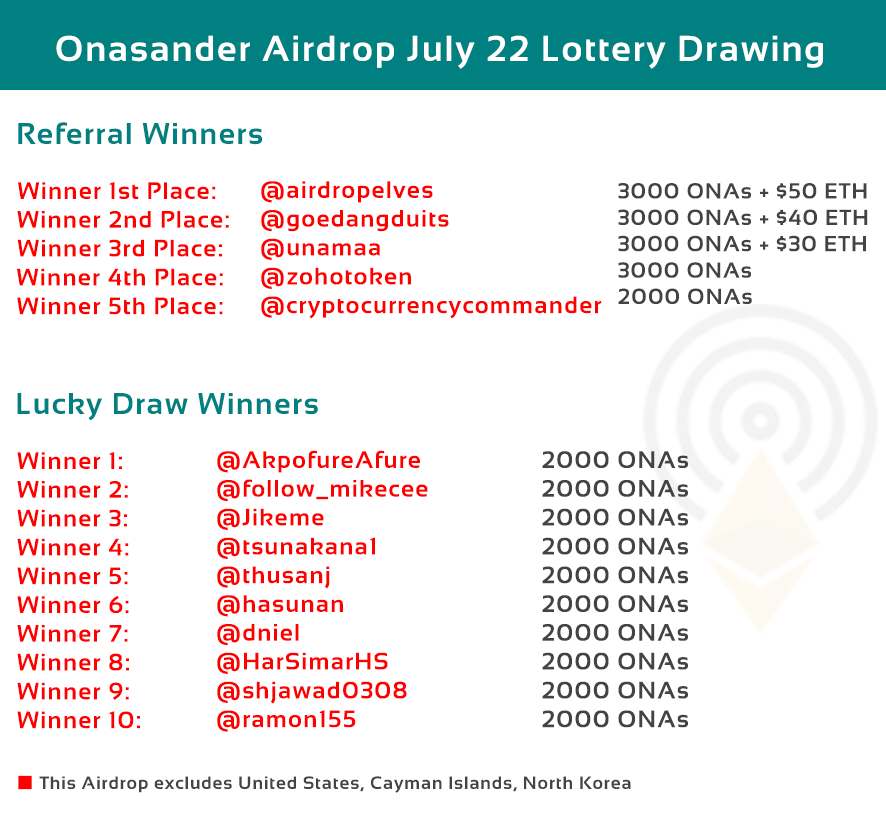
<style>
.page{position:relative;width:886px;height:816px;background:#ffffff}
.page>*{position:absolute;margin:0}
.t1{font:36px "Sansation-Bold";letter-spacing:0.05em;color:#ffffff}
.t2{font:30px "Sansation-Bold";letter-spacing:0.05em;color:#008080}
.t3{font:24px "Sansation-Bold";letter-spacing:0.05em;color:#ff0000}
.t4{font:22px "Sansation-Bold";letter-spacing:0.05em;color:#434244}
.t5{font:24px "Sansation-Bold";letter-spacing:0.05em;color:#434244}
.t6{font:18px "Sansation-Bold";letter-spacing:0.05em;color:#444444}
</style>
<div class="page">
<p class="t1" style="left:56px;top:35px;width:767px;height:34px">Onasander Airdrop July 22 Lottery Drawing</p>
<p class="t2" style="left:18px;top:122px;width:245px;height:23px">Referral Winners</p>
<p class="t3" style="left:17px;top:182px;width:212px;height:133px;text-align:center">Winner 1st Place:<br>  Winner 2nd Place:<br> Winner 3rd Place:<br> Winner 4th Place:<br> Winner 5th Place:</p>
<p class="t3" style="left:261px;top:181px;width:341px;height:138px">@airdropelves<br>@goedangduits<br>@unamaa<br>@zohotoken<br>@cryptocurrencycommander</p>
<p class="t4" style="left:618px;top:183px;width:250px;height:121px">3000 ONAs + $50 ETH<br>3000 ONAs + $40 ETH<br>3000 ONAs + $30 ETH<br>3000 ONAs<br>2000 ONAs</p>
<p class="t2" style="left:17px;top:393px;width:301px;height:28px">Lucky Draw Winners</p>
<p class="t3" style="left:17px;top:452px;width:123px;height:277px">Winner 1: <br>Winner 2:<br>Winner 3:<br>Winner 4:<br>Winner 5:<br>Winner 6:<br>Winner 7:<br>Winner 8:<br>Winner 9:<br>Winner 10:</p>
<p class="t3" style="left:217px;top:450px;width:211px;height:282px">@AkpofureAfure<br>@follow_mikecee<br>@Jikeme<br>@tsunakana1<br>@thusanj<br>@hasunan<br>@dniel<br>@HarSimarHS<br>@shjawad0308<br>@ramon155</p>
<p class="t5" style="left:542px;top:451px;width:146px;height:277px;text-align:center">2000 ONAs<br>2000 ONAs<br>2000 ONAs<br>2000 ONAs<br>2000 ONAs<br>2000 ONAs<br>2000 ONAs<br>2000 ONAs<br>2000 ONAs<br>2000 ONAs</p>
<p class="t6" style="left:39px;top:776px;width:592px;height:17px">This Airdrop excludes United States, Cayman Islands, North Korea</p>
</div>
